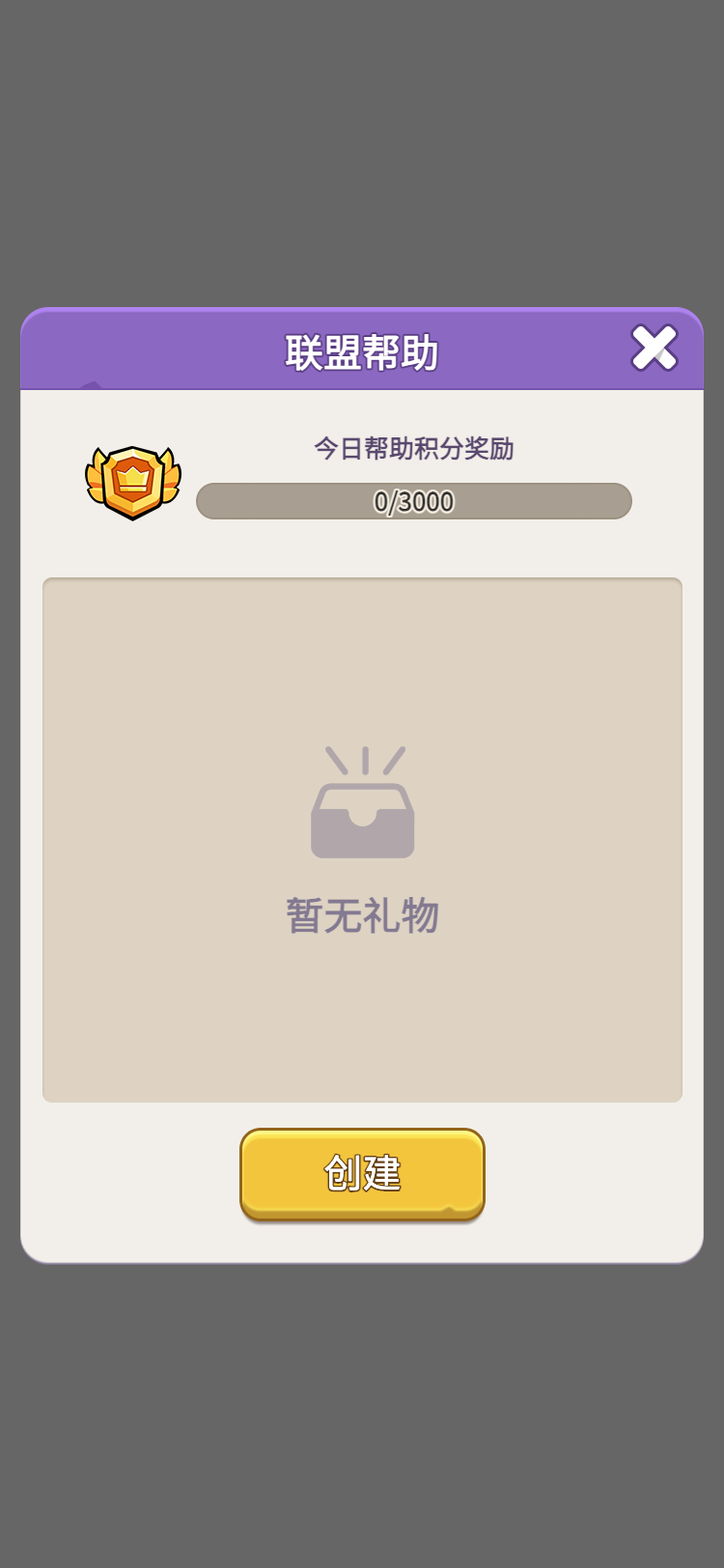
<style>
.page{position:relative;width:724px;height:1568px;background:#666666}
.page>*{position:absolute;margin:0}
.t1{font:38.6px "WebPSD-18463539-0-Regular";color:#ffffff;font-weight:bold}
.t2{font:25.1px "WebPSD-18463539-0-Regular";color:#59496e;font-weight:bold}
.t3{font:25.1px "WebPSD-18463539-0-Regular";color:#33312e;font-weight:bold}
.t4{font:38.6px "WebPSD-18463539-0-Regular";color:#837a91;font-weight:bold}
.t5{font:38.6px/38.6px "WebPSD-18463539-0-Regular";color:#ffffff}
</style>
<div class="page">
<p class="t1" style="left:107px;top:324px;width:510px;height:56px">联盟帮助</p>
<p class="t2" style="left:196px;top:435px;width:436px;height:26px">今日帮助积分奖励</p>
<p class="t3" style="left:196px;top:483px;width:436px;height:36px">0/3000</p>
<p class="t4" style="left:42px;top:896px;width:641px;height:39px">暂无礼物</p>
<p class="t5" style="left:247px;top:1132px;width:231px;height:83px;text-align:center">创建</p>
</div>
